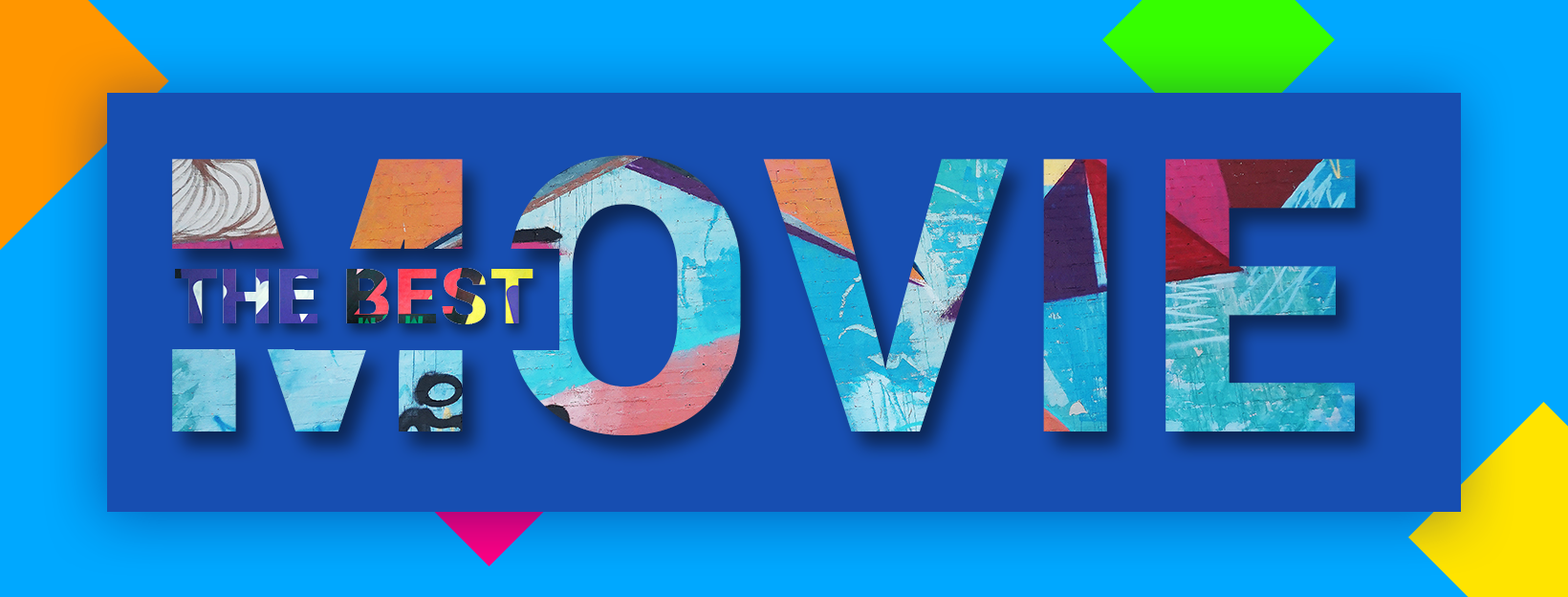
<style>
.page{position:relative;width:1568px;height:597px;background:#174eb1}
.page>*{position:absolute;margin:0}
.t1{font:382.4px "Roboto-Black";letter-spacing:0.03em;text-transform:uppercase}
.t2{font:76.5px "Roboto-Black";letter-spacing:0.03em;text-transform:uppercase}
</style>
<div class="page">
<p class="t1" style="left:172px;top:155px;width:1184px;height:280px">Movie</p>
<p class="t2" style="left:175px;top:268px;width:359px;height:56px">The best</p>
</div>
